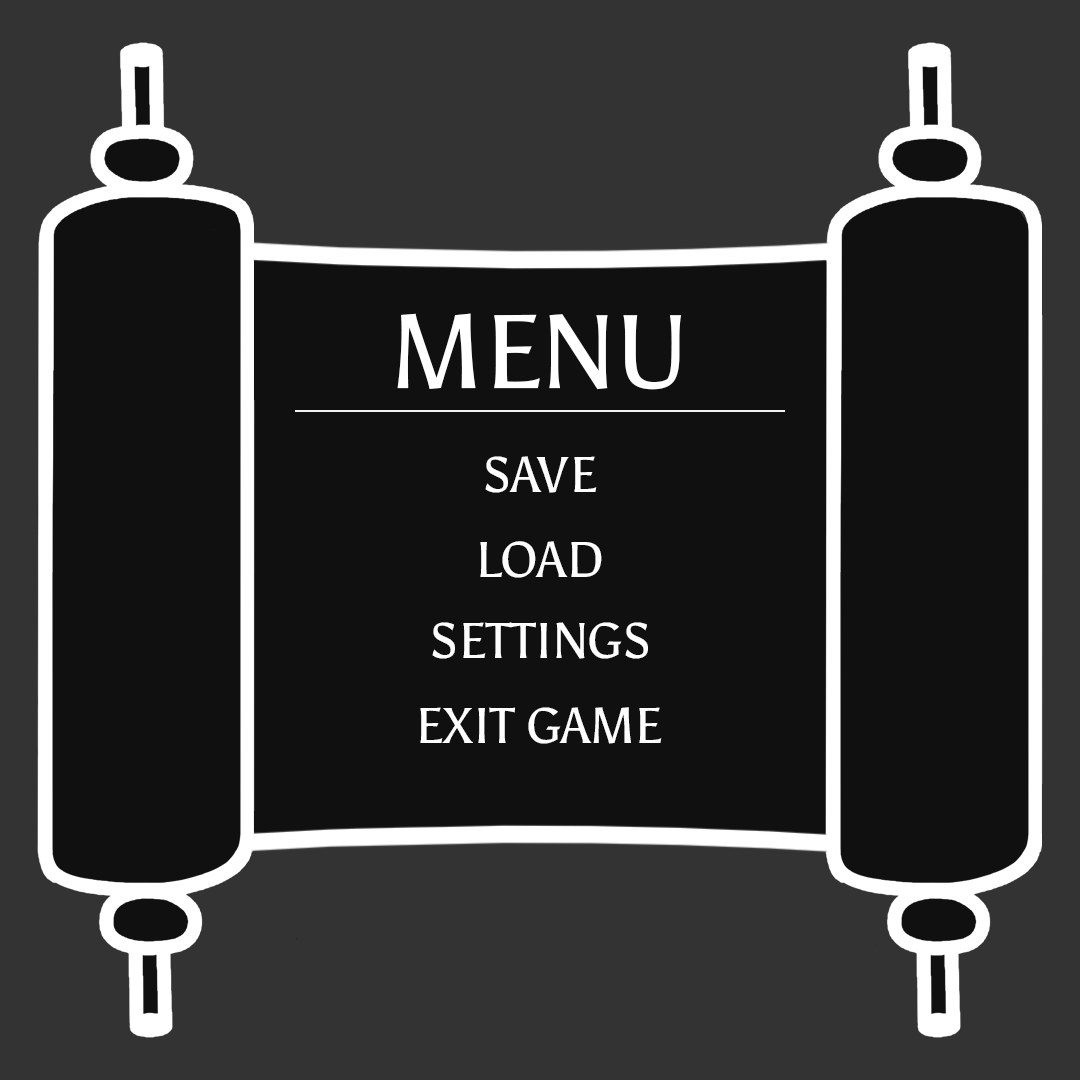
<style>
.page{position:relative;width:1080px;height:1080px;background:#101010}
.page>*{position:absolute;margin:0}
.t1{font:104.2px "Asul-Regular";color:#ffffff}
.t2{font:50px "Asul-Regular";color:#ffffff}
</style>
<div class="page">
<p class="t1" style="left:397px;top:313px;width:284px;height:77px">MENU</p>
<p class="t2" style="left:485px;top:456px;width:112px;height:37px">SAVE</p>
<p class="t2" style="left:480px;top:541px;width:122px;height:37px">LOAD</p>
<p class="t2" style="left:432px;top:622px;width:216px;height:37px">SETTINGS</p>
<p class="t2" style="left:420px;top:707px;width:242px;height:37px">EXIT GAME</p>
</div>
